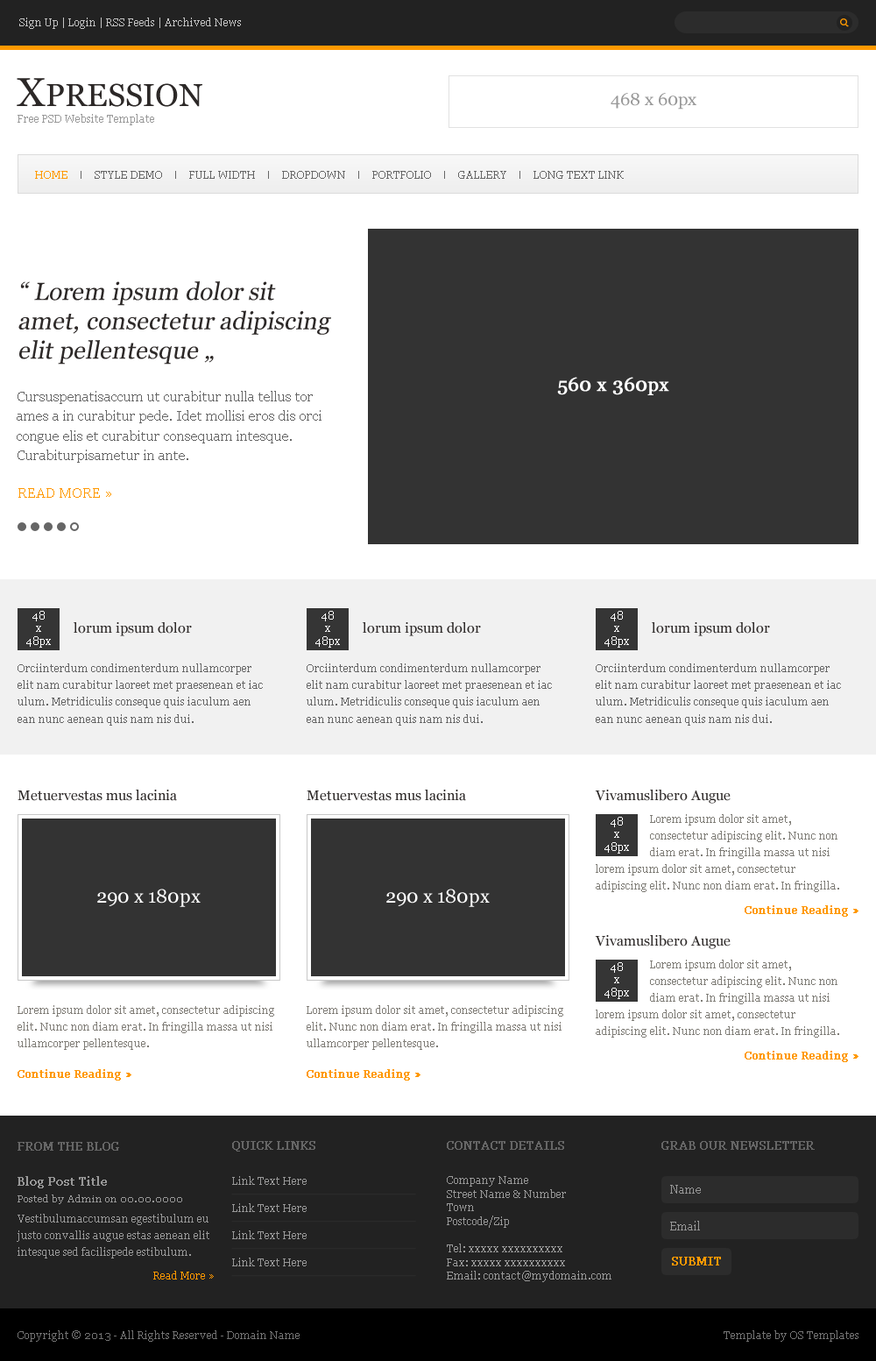
<style>
.page{position:relative;width:876px;height:1361px;background:#ffffff}
.page>*{position:absolute;margin:0}
.t1{font:10.5px "Georgia";color:#c4c4c4}
.t2{font:31.5px "Georgia";color:#2c2827}
.t3{font:40.3px "Georgia";color:#2c2827}
.t4{font:17.5px "Georgia";color:#999999}
.t5{font:10.5px "Georgia";color:#999999}
.t6{font:10.5px "Georgia";color:#ff9900}
.t7{font:10.5px "Georgia";color:#666666}
.t8{font:24.5px/29.4px "Georgia";color:#2d2928;font-style:italic}
.t9{font:19.3px "Georgia";color:#ffffff;font-weight:bold}
.t10{font:14px/19.6px "Georgia";color:#666666}
.t11{font:14px "Georgia";color:#ff9900}
.t12{font:10.5px/12.6px "Georgia";color:#ffffff}
.t13{font:14px "Georgia";color:#2d2928}
.t14{font:10.5px/16.8px "Georgia";color:#666666}
.t15{font:10.5px/16.8px "Georgia";color:#7f7d77}
.t16{font:19.3px "Georgia";color:#ffffff}
.t17{font:10.5px "Georgia";color:#ff9900;font-weight:bold}
.t18{font:10.5px/16.8px "Georgia";color:#807d77}
.t19{font:11.4px "Georgia";color:#666666;font-weight:bold}
.t20{font:11.4px "Georgia";color:#999999;font-weight:bold}
.t21{font:10.5px/13.7px "Georgia";color:#999999}
.t22{font:11.4px "Georgia";color:#989898}
.t23{font:9.6px "Georgia";color:#999999}
.t24{font:10.5px/16.8px "Georgia";color:#999999}
.t25{font:11.4px "Georgia";color:#ff9900;font-weight:bold}
.t26{font:10.5px "Georgia";color:#737373}
</style>
<div class="page">
<p class="t1" style="left:19px;top:18px;width:222px;height:11px">Sign Up | Login | RSS Feeds | Archived News</p>
<p class="t2" style="left:17px;top:78px;width:185px;height:29px"><span class="t3">X</span>PRESSION</p>
<p class="t4" style="left:611px;top:93px;width:86px;height:17px">468 x 60px</p>
<p class="t5" style="left:18px;top:114px;width:136px;height:11px">Free PSD Website Template</p>
<p class="t6" style="left:35px;top:171px;width:32px;height:8px">HOME</p>
<p class="t7" style="left:95px;top:171px;width:67px;height:8px">STYLE DEMO</p>
<p class="t7" style="left:189px;top:171px;width:66px;height:8px">FULL WIDTH</p>
<p class="t7" style="left:282px;top:171px;width:63px;height:8px">DROPDOWN</p>
<p class="t7" style="left:372px;top:171px;width:59px;height:8px">PORTFOLIO</p>
<p class="t7" style="left:458px;top:171px;width:48px;height:8px">GALLERY</p>
<p class="t7" style="left:534px;top:171px;width:90px;height:8px">LONG TEXT LINK</p>
<p class="t8" style="left:18px;top:281px;width:313px;height:84px">“ Lorem ipsum dolor sit amet, consectetur adipiscing elit pellentesque „</p>
<p class="t9" style="left:557px;top:377px;width:112px;height:18px">560 x 360px</p>
<p class="t10" style="left:17px;top:391px;width:305px;height:72px">Cursuspenatisaccum ut curabitur nulla tellus tor ames a in curabitur pede. Idet mollisi eros dis orci congue elis et curabitur consequam intesque. Curabiturpisametur in ante.</p>
<p class="t11" style="left:18px;top:488px;width:93px;height:10px">READ MORE »</p>
<p class="t12" style="left:26px;top:611px;width:25px;height:37px;text-align:center">48<br>x<br>48px</p>
<p class="t12" style="left:315px;top:611px;width:25px;height:37px;text-align:center">48<br>x<br>48px</p>
<p class="t12" style="left:605px;top:611px;width:24px;height:37px;text-align:center">48<br>x<br>48px</p>
<p class="t13" style="left:74px;top:622px;width:118px;height:14px">lorum ipsum dolor</p>
<p class="t13" style="left:363px;top:622px;width:118px;height:14px">lorum ipsum dolor</p>
<p class="t13" style="left:652px;top:622px;width:118px;height:14px">lorum ipsum dolor</p>
<p class="t14" style="left:18px;top:663px;width:245px;height:63px">Orciinterdum condimenterdum nullamcorper <br>elit nam curabitur laoreet met praesenean et iac<br>ulum. Metridiculis conseque quis iaculum aen<br>ean nunc aenean quis nam nis dui.</p>
<p class="t14" style="left:307px;top:663px;width:245px;height:63px">Orciinterdum condimenterdum nullamcorper <br>elit nam curabitur laoreet met praesenean et iac<br>ulum. Metridiculis conseque quis iaculum aen<br>ean nunc aenean quis nam nis dui.</p>
<p class="t14" style="left:596px;top:663px;width:245px;height:63px">Orciinterdum condimenterdum nullamcorper <br>elit nam curabitur laoreet met praesenean et iac<br>ulum. Metridiculis conseque quis iaculum aen<br>ean nunc aenean quis nam nis dui.</p>
<p class="t13" style="left:18px;top:790px;width:159px;height:11px">Metuervestas mus lacinia</p>
<p class="t13" style="left:307px;top:790px;width:159px;height:11px">Metuervestas mus lacinia</p>
<p class="t13" style="left:595px;top:790px;width:136px;height:14px">Vivamuslibero Augue</p>
<p class="t12" style="left:605px;top:817px;width:24px;height:36px;text-align:center">48<br>x<br>48px</p>
<p class="t15" style="left:650px;top:814px;width:188px;height:45px">Lorem ipsum dolor sit amet, consectetur adipiscing elit. Nunc non diam erat. In fringilla massa ut nisi</p>
<p class="t15" style="left:596px;top:864px;width:243px;height:28px">lorem ipsum dolor sit amet, consectetur adipiscing elit. Nunc non diam erat. In fringilla.</p>
<p class="t16" style="left:97px;top:889px;width:104px;height:18px">290 x 180px</p>
<p class="t16" style="left:386px;top:889px;width:104px;height:18px">290 x 180px</p>
<p class="t17" style="left:745px;top:905px;width:114px;height:12px">Continue Reading »</p>
<p class="t13" style="left:595px;top:935px;width:136px;height:14px">Vivamuslibero Augue</p>
<p class="t12" style="left:605px;top:962px;width:24px;height:37px;text-align:center">48<br>x<br>48px</p>
<p class="t15" style="left:650px;top:960px;width:188px;height:44px">Lorem ipsum dolor sit amet, consectetur adipiscing elit. Nunc non diam erat. In fringilla massa ut nisi</p>
<p class="t18" style="left:18px;top:1005px;width:256px;height:45px">Lorem ipsum dolor sit amet, consectetur adipiscing elit. Nunc non diam erat. In fringilla massa ut nisi ullamcorper pellentesque.</p>
<p class="t18" style="left:307px;top:1005px;width:256px;height:45px">Lorem ipsum dolor sit amet, consectetur adipiscing elit. Nunc non diam erat. In fringilla massa ut nisi ullamcorper pellentesque.</p>
<p class="t15" style="left:596px;top:1009px;width:243px;height:28px">lorem ipsum dolor sit amet, consectetur adipiscing elit. Nunc non diam erat. In fringilla.</p>
<p class="t17" style="left:745px;top:1051px;width:114px;height:11px">Continue Reading »</p>
<p class="t17" style="left:18px;top:1069px;width:113px;height:11px">Continue Reading »</p>
<p class="t17" style="left:307px;top:1069px;width:114px;height:11px">Continue Reading »</p>
<p class="t19" style="left:18px;top:1142px;width:101px;height:9px">FROM THE BLOG</p>
<p class="t19" style="left:232px;top:1141px;width:83px;height:10px">QUICK LINKS</p>
<p class="t19" style="left:447px;top:1141px;width:117px;height:9px">CONTACT DETAILS</p>
<p class="t19" style="left:662px;top:1141px;width:153px;height:9px">GRAB OUR NEWSLETTER</p>
<p class="t20" style="left:18px;top:1176px;width:89px;height:12px">Blog Post Title</p>
<p class="t5" style="left:232px;top:1176px;width:75px;height:9px">Link Text Here</p>
<p class="t21" style="left:447px;top:1176px;width:165px;height:106px">Company Name<br>Street Name &amp; Number<br>Town<br>Postcode/Zip<br><br>Tel: xxxxx xxxxxxxxxx<br>Fax: xxxxx xxxxxxxxxx<br>Email: contact@mydomain.com</p>
<p class="t22" style="left:670px;top:1185px;width:31px;height:8px">Name</p>
<p class="t23" style="left:18px;top:1194px;width:164px;height:10px">Posted by Admin on 00.00.0000</p>
<p class="t5" style="left:232px;top:1203px;width:75px;height:9px">Link Text Here</p>
<p class="t24" style="left:17px;top:1214px;width:192px;height:44px">Vestibulumaccumsan egestibulum eu justo convallis augue estas aenean elit intesque sed facilispede estibulum.</p>
<p class="t22" style="left:670px;top:1221px;width:30px;height:9px">Email</p>
<p class="t5" style="left:232px;top:1230px;width:75px;height:9px">Link Text Here</p>
<p class="t5" style="left:232px;top:1257px;width:75px;height:9px">Link Text Here</p>
<p class="t25" style="left:672px;top:1257px;width:49px;height:8px">SUBMIT</p>
<p class="t6" style="left:153px;top:1271px;width:61px;height:8px">Read More »</p>
<p class="t26" style="left:18px;top:1330px;width:282px;height:12px">Copyright © 2013 - All Rights Reserved - Domain Name</p>
<p class="t26" style="left:724px;top:1330px;width:135px;height:12px">Template by OS Templates</p>
</div>
